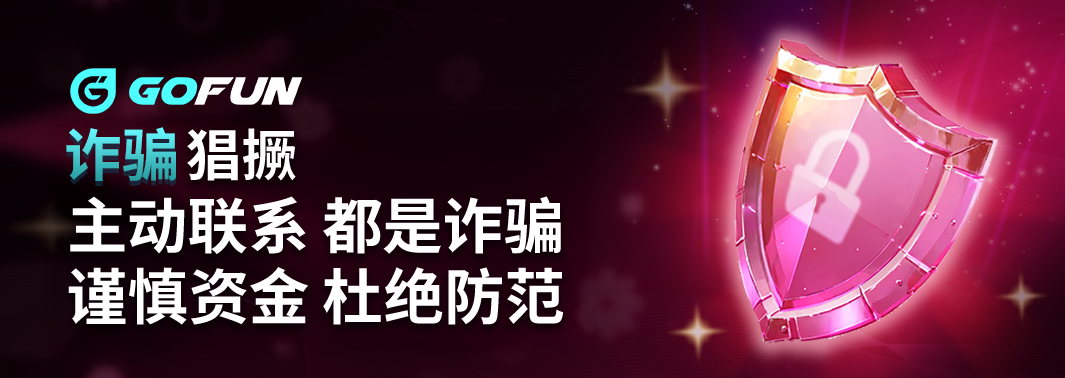
<style>
.page{position:relative;width:1065px;height:378px}
.page>*{position:absolute;margin:0}
.t1{font:57.2px "NotoSansCJKtc-Bold";letter-spacing:-0.01em}
.t2{font:55.5px "NotoSansCJKtc-Bold";letter-spacing:-0.01em;color:#ffffff}
.t3{font:60.8px "NotoSansCJKtc-Bold";letter-spacing:-0.01em;color:#ffffff}
</style>
<div class="page">
<p class="t1" style="left:66px;top:127px;width:110px;height:54px">诈骗</p>
<p class="t2" style="left:187px;top:128px;width:109px;height:53px">猖撅</p>
<p class="t3" style="left:70px;top:196px;width:491px;height:59px">主动联系 都是诈骗</p>
<p class="t3" style="left:68px;top:267px;width:496px;height:58px">谨慎资金 杜绝防范</p>
</div>
